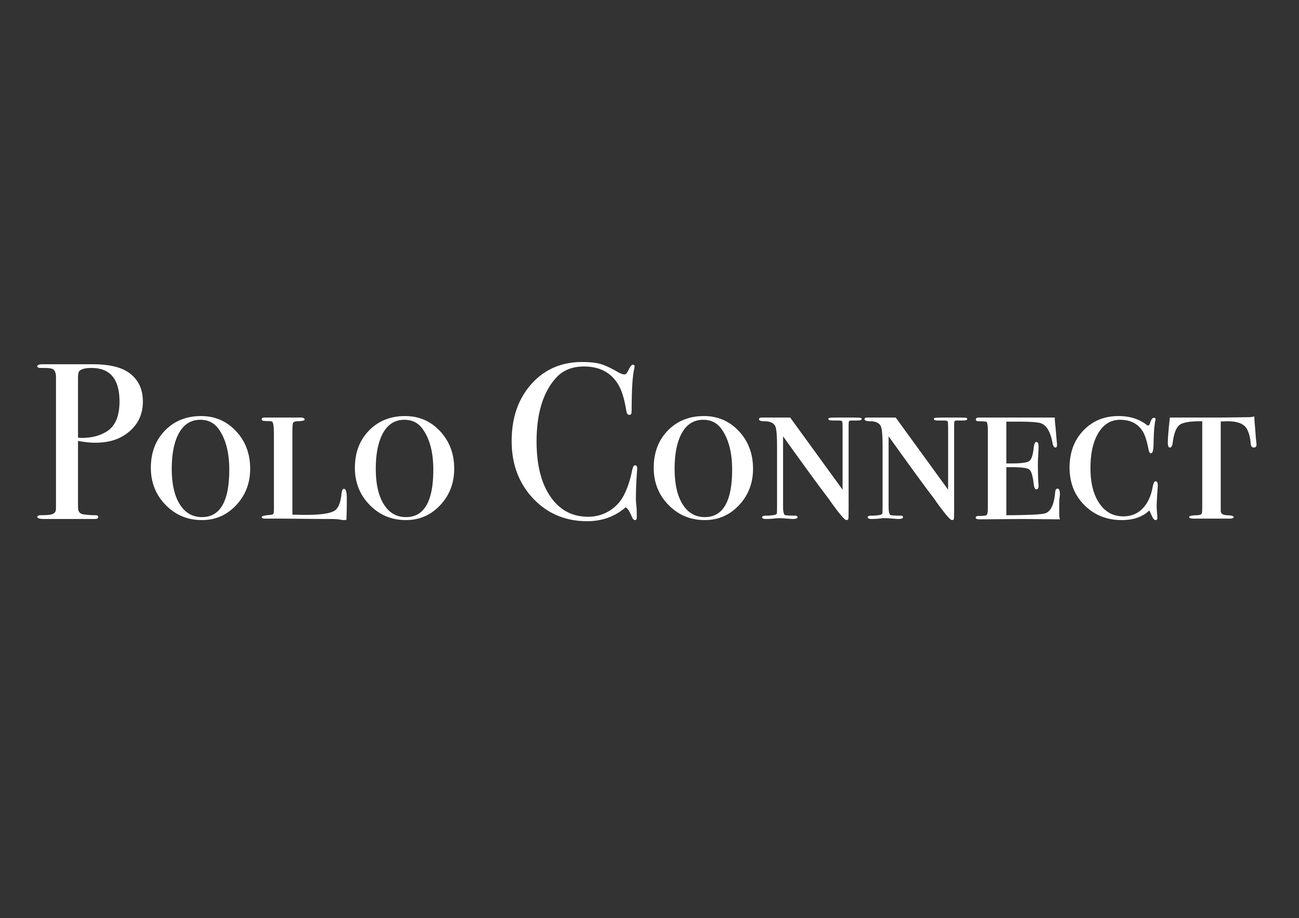
<style>
.page{position:relative;width:1299px;height:918px;background:#333333}
.page>*{position:absolute;margin:0}
.t1{font:222.1px "BodoniSvtyTwoSCITCTT-Book";color:#ffffff}
</style>
<div class="page">
<p class="t1" style="left:37px;top:362px;width:1220px;height:159px">Polo Connect</p>
</div>
